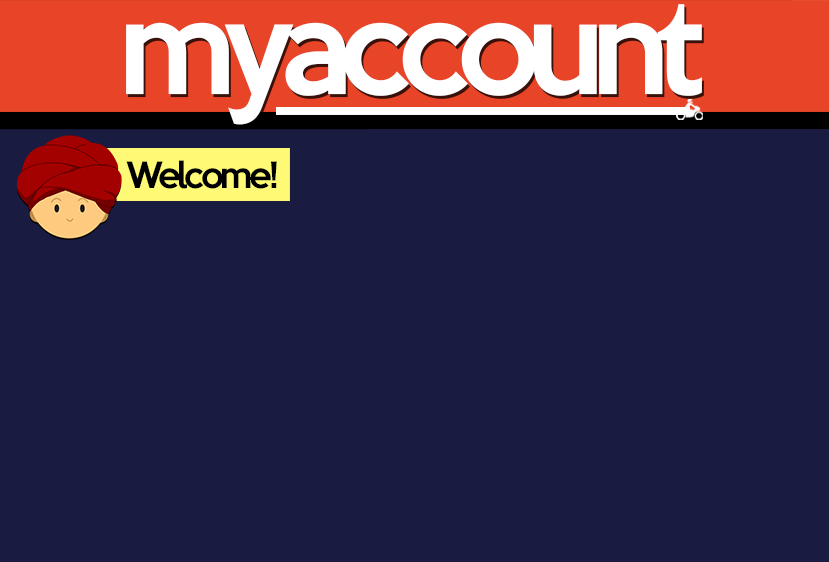
<style>
.page{position:relative;width:829px;height:562px;background:#1a1b41}
.page>*{position:absolute;margin:0}
.t1{font:119.9px "KeepCalm-Medium";letter-spacing:-0.1em;color:#ffffff}
.t2{font:33.3px "KeepCalm-Medium";letter-spacing:-0.1em;color:#000000}
</style>
<div class="page">
<p class="t1" style="left:126px;top:4px;width:576px;height:121px">myaccount</p>
<p class="t2" style="left:126px;top:160px;width:151px;height:29px">Welcome!</p>
</div>
